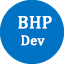
<style>
.page{position:relative;width:64px;height:64px;background:#0073c5}
.page>*{position:absolute;margin:0}
.t1{font:18px "Cambria";color:#ffffff;font-weight:bold}
.t2{font:14px "Cambria";color:#ffffff;font-weight:bold}
</style>
<div class="page">
<p class="t1" style="left:18px;top:16px;width:34px;height:13px">BHP</p>
<p class="t2" style="left:21px;top:35px;width:24px;height:11px">Dev</p>
</div>
